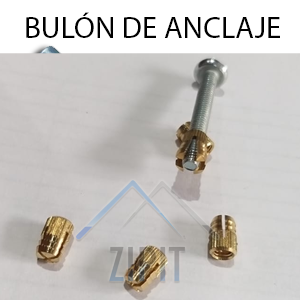
<style>
.page{position:relative;width:300px;height:300px}
.page>*{position:absolute;margin:0}
.t1{font:30.8px "MyriadPro-Regular";color:#000000}
</style>
<div class="page">
<p class="t1" style="left:26px;top:12px;width:254px;height:26px">BULÓN DE ANCLAJE</p>
</div>
